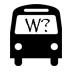
<style>
.page{position:relative;width:72px;height:72px;background:#ffffff}
.page>*{position:absolute;margin:0}
.t1{font:20.2px "Papyrus";color:#000000}
</style>
<div class="page">
<p class="t1" style="left:25px;top:18px;width:25px;height:15px">W?</p>
</div>
